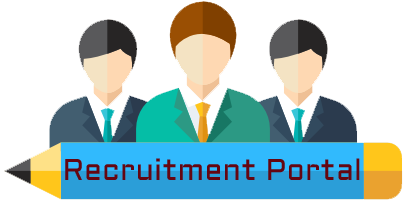
<style>
.page{position:relative;width:411px;height:205px;background:#ffffff}
.page>*{position:absolute;margin:0}
.t1{font:30px "Aldrich";color:#650611}
</style>
<div class="page">
<p class="t1" style="left:65px;top:158px;width:295px;height:22px">Recruitment Portal</p>
</div>
